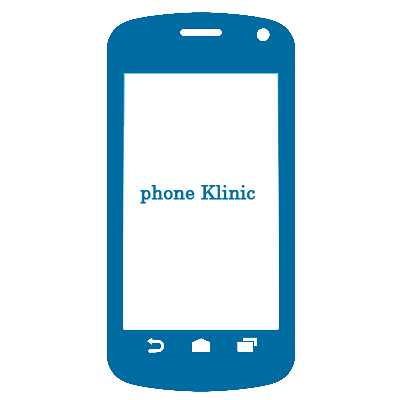
<style>
.page{position:relative;width:400px;height:400px;background:#ffffff}
.page>*{position:absolute;margin:0}
.t1{font:18.7px "CenturySchoolbook";color:#006ca2;font-weight:bold}
.t2{font:12px "Tahoma";color:#90bde5;font-weight:bold}
</style>
<div class="page">
<p class="t1" style="left:140px;top:185px;width:116px;height:19px"><span class="t2"><br><br><br><br></span>phone Klinic</p>
</div>
